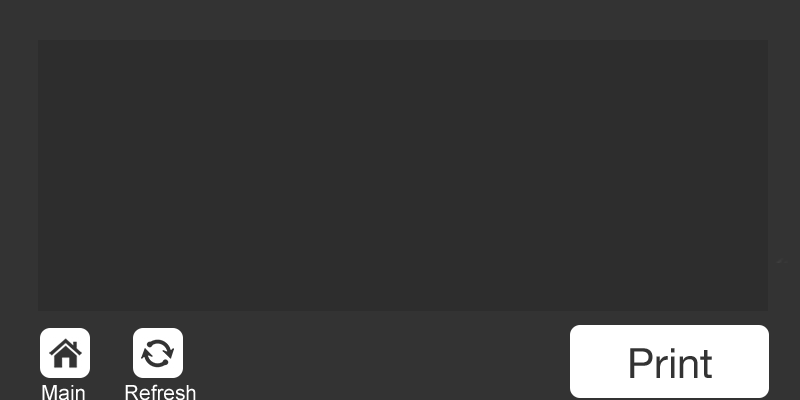
<style>
.page{position:relative;width:800px;height:400px;background:#2d2d2d}
.page>*{position:absolute;margin:0}
.t1{font:41.7px "HelveticaNeue-Roman";color:#333333}
.t2{font:20.8px "ArialMT";color:#ffffff}
</style>
<div class="page">
<p class="t1" style="left:630px;top:348px;width:82px;height:30px">Print</p>
<p class="t2" style="left:42px;top:385px;width:43px;height:16px">Main</p>
<p class="t2" style="left:125px;top:384px;width:71px;height:17px">Refresh</p>
</div>
